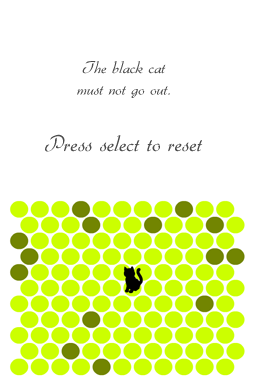
<style>
.page{position:relative;width:256px;height:384px;background:#ffffff}
.page>*{position:absolute;margin:0}
.t1{font:18px "Gabrielle";color:#4c4c4c}
.t2{font:24px "Gabrielle";color:#4c4c4c}
</style>
<div class="page">
<p class="t1" style="left:77px;top:61px;width:93px;height:37px;text-align:center">The black cat<br>must not go out.</p>
<p class="t2" style="left:45px;top:134px;width:158px;height:18px">Press select to reset</p>
</div>
